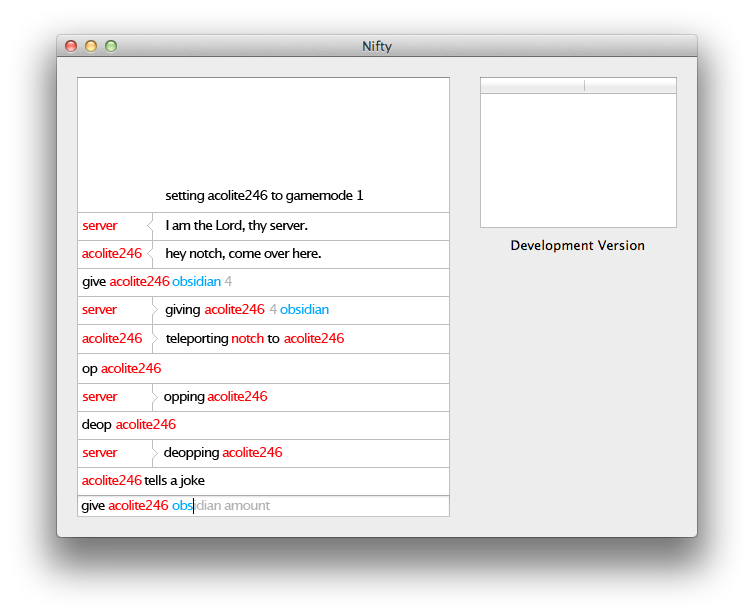
<style>
.page{position:relative;width:754px;height:616px;background:#ffffff}
.page>*{position:absolute;margin:0}
.t1{font:14px "LucidaGrande";letter-spacing:-0.08em;color:#000000}
.t2{font:14px "LucidaGrande";letter-spacing:-0.08em;color:#ff0006}
.t3{font:14px "LucidaGrande";letter-spacing:-0.08em;color:#00a9ff}
.t4{font:14px "LucidaGrande";letter-spacing:-0.08em;color:#b2b2b2}
</style>
<div class="page">
<p class="t1" style="left:165px;top:190px;width:199px;height:13px">setting acolite246 to gamemode 1</p>
<p class="t1" style="left:166px;top:220px;width:142px;height:13px">I am the Lord, thy server.</p>
<p class="t2" style="left:82px;top:223px;width:36px;height:7px">server</p>
<p class="t2" style="left:82px;top:248px;width:60px;height:10px">acolite246</p>
<p class="t1" style="left:166px;top:248px;width:155px;height:13px">hey notch, come over here.</p>
<p class="t1" style="left:82px;top:276px;width:24px;height:13px">give</p>
<p class="t2" style="left:109px;top:276px;width:61px;height:10px">acolite246</p>
<p class="t3" style="left:172px;top:276px;width:49px;height:10px">obsidian</p>
<p class="t4" style="left:224px;top:276px;width:8px;height:10px">4</p>
<p class="t1" style="left:165px;top:304px;width:35px;height:13px">giving</p>
<p class="t2" style="left:204px;top:304px;width:61px;height:10px">acolite246</p>
<p class="t4" style="left:269px;top:304px;width:8px;height:10px">4</p>
<p class="t3" style="left:280px;top:304px;width:49px;height:10px">obsidian</p>
<p class="t2" style="left:82px;top:307px;width:36px;height:7px">server</p>
<p class="t2" style="left:82px;top:333px;width:60px;height:10px">acolite246</p>
<p class="t1" style="left:166px;top:333px;width:63px;height:13px">teleporting</p>
<p class="t2" style="left:232px;top:333px;width:32px;height:10px">notch</p>
<p class="t1" style="left:267px;top:335px;width:13px;height:8px">to</p>
<p class="t2" style="left:284px;top:333px;width:60px;height:10px">acolite246</p>
<p class="t1" style="left:82px;top:366px;width:16px;height:10px">op</p>
<p class="t2" style="left:101px;top:363px;width:60px;height:10px">acolite246</p>
<p class="t2" style="left:82px;top:394px;width:36px;height:7px">server</p>
<p class="t1" style="left:164px;top:391px;width:41px;height:13px">opping</p>
<p class="t2" style="left:207px;top:391px;width:61px;height:10px">acolite246</p>
<p class="t1" style="left:82px;top:419px;width:30px;height:13px">deop</p>
<p class="t2" style="left:116px;top:419px;width:60px;height:10px">acolite246</p>
<p class="t1" style="left:164px;top:447px;width:55px;height:13px">deopping</p>
<p class="t2" style="left:222px;top:447px;width:61px;height:10px">acolite246</p>
<p class="t2" style="left:82px;top:450px;width:36px;height:7px">server</p>
<p class="t2" style="left:82px;top:475px;width:60px;height:10px">acolite246</p>
<p class="t1" style="left:144px;top:475px;width:61px;height:13px">tells a joke</p>
<p class="t1" style="left:81px;top:500px;width:24px;height:13px">give</p>
<p class="t2" style="left:108px;top:500px;width:61px;height:10px">acolite246</p>
<p class="t3" style="left:172px;top:500px;width:21px;height:10px">obs</p>
<p class="t4" style="left:194px;top:500px;width:27px;height:10px">idian</p>
<p class="t4" style="left:224px;top:502px;width:47px;height:8px">amount</p>
</div>
